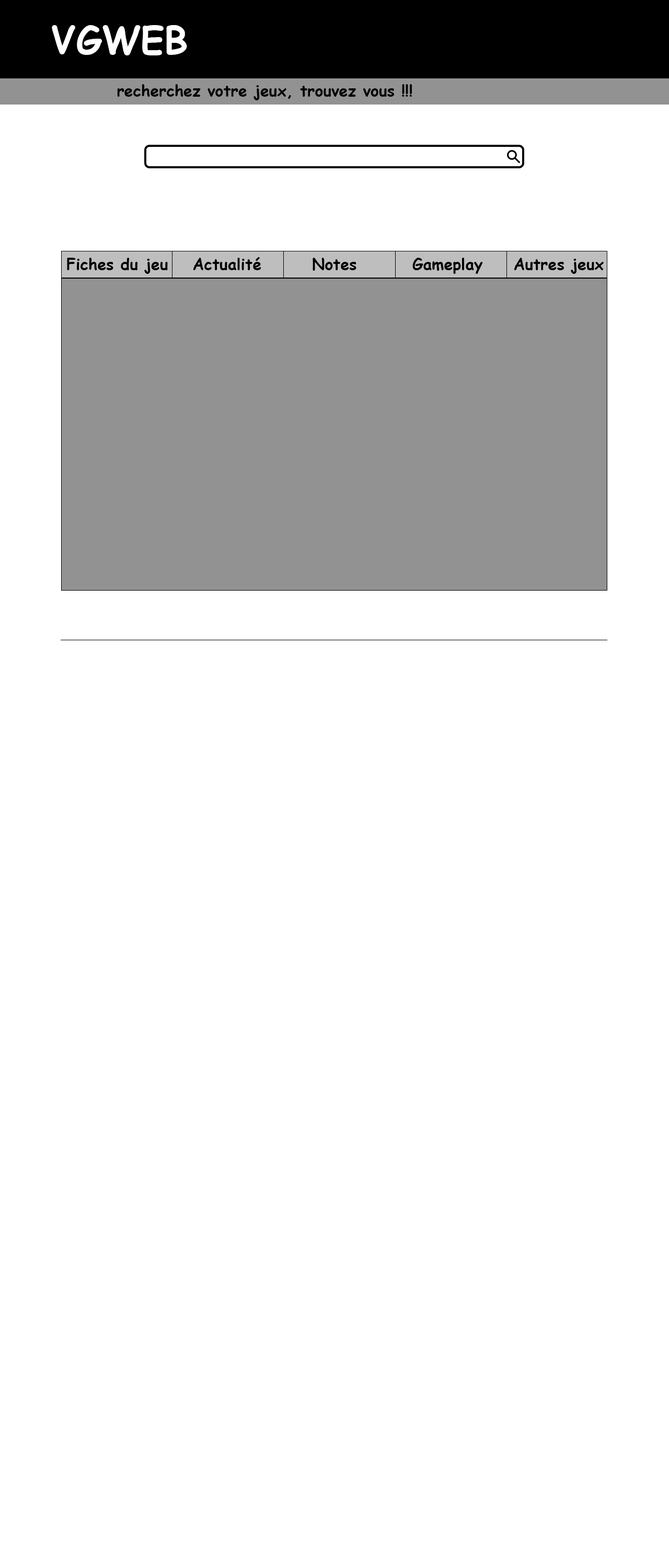
<style>
.page{position:relative;width:669px;height:1568px;background:#ffffff}
.page>*{position:absolute;margin:0}
.t1{font:37.6px "ComicSansMS-Bold";color:#ffffff}
.t2{font:15.7px "ComicSansMS-Bold";color:#000000}
</style>
<div class="page">
<p class="t1" style="left:52px;top:25px;width:135px;height:30px">VGWEB</p>
<p class="t2" style="left:117px;top:84px;width:295px;height:16px">recherchez votre jeux, trouvez vous !!!</p>
<p class="t2" style="left:67px;top:258px;width:101px;height:16px">Fiches du jeu</p>
<p class="t2" style="left:193px;top:257px;width:68px;height:13px">Actualité</p>
<p class="t2" style="left:313px;top:258px;width:43px;height:13px">Notes</p>
<p class="t2" style="left:412px;top:258px;width:71px;height:16px">Gameplay</p>
<p class="t2" style="left:514px;top:258px;width:90px;height:16px">Autres jeux</p>
</div>
